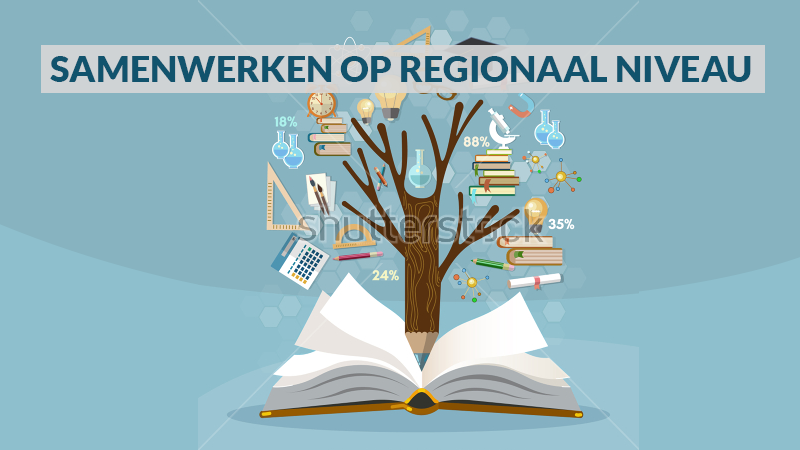
<style>
.page{position:relative;width:800px;height:450px;background:#87b3c0}
.page>*{position:absolute;margin:0}
.t1{font:36px "Lato-Black";color:#11536d}
</style>
<div class="page">
<p class="t1" style="left:50px;top:56px;width:701px;height:26px">SAMENWERKEN OP REGIONAAL NIVEAU</p>
</div>
